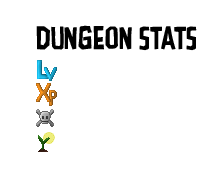
<style>
.page{position:relative;width:215px;height:189px;background:#ffffff}
.page>*{position:absolute;margin:0}
.t1{font:34px "ADPolaquita";color:#000000;text-transform:uppercase}
</style>
<div class="page">
<p class="t1" style="left:36px;top:25px;width:161px;height:26px">Dungeon Stats</p>
</div>
